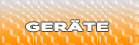
<style>
.page{position:relative;width:139px;height:45px}
.page>*{position:absolute;margin:0}
.t1{font:12px "FluidTitleCaps";color:#ffffff;scale:1.63 1}
</style>
<div class="page">
<p class="t1" style="left:25px;top:20px;width:84px;height:12px">Geräte</p>
</div>
